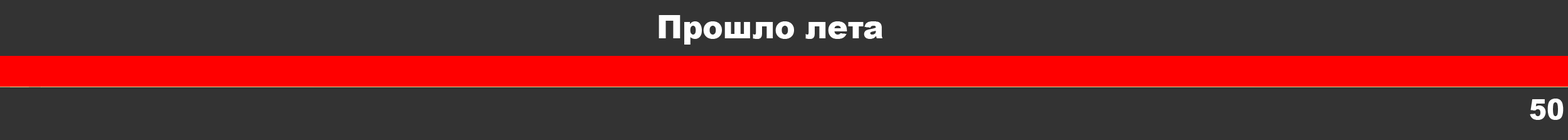
<style>
.page{position:relative;width:1568px;height:140px;background:#333333}
.page>*{position:absolute;margin:0}
.t1{font:31.8px "Arial-Black";color:#ffffff;scale:0.97 1}
.t2{font:27.3px "Arial-Black";color:#ffffff;scale:0.97 1}
</style>
<div class="page">
<p class="t1" style="left:659px;top:15px;width:223px;height:30px">Прошло лета</p>
<p class="t2" style="left:1530px;top:98px;width:34px;height:22px">50</p>
</div>
